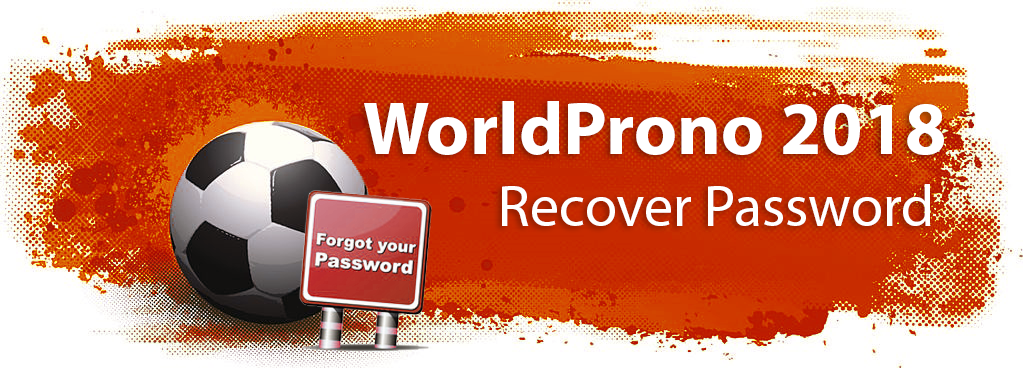
<style>
.page{position:relative;width:1023px;height:368px}
.page>*{position:absolute;margin:0}
.t1{font:75px "MyriadPro-Bold";color:#ffffff}
.t2{font:58.3px "MyriadPro-Regular";color:#ffffff}
</style>
<div class="page">
<p class="t1" style="left:364px;top:101px;width:580px;height:54px">WorldProno 2018</p>
<p class="t2" style="left:502px;top:184px;width:429px;height:42px">Recover Password</p>
</div>
